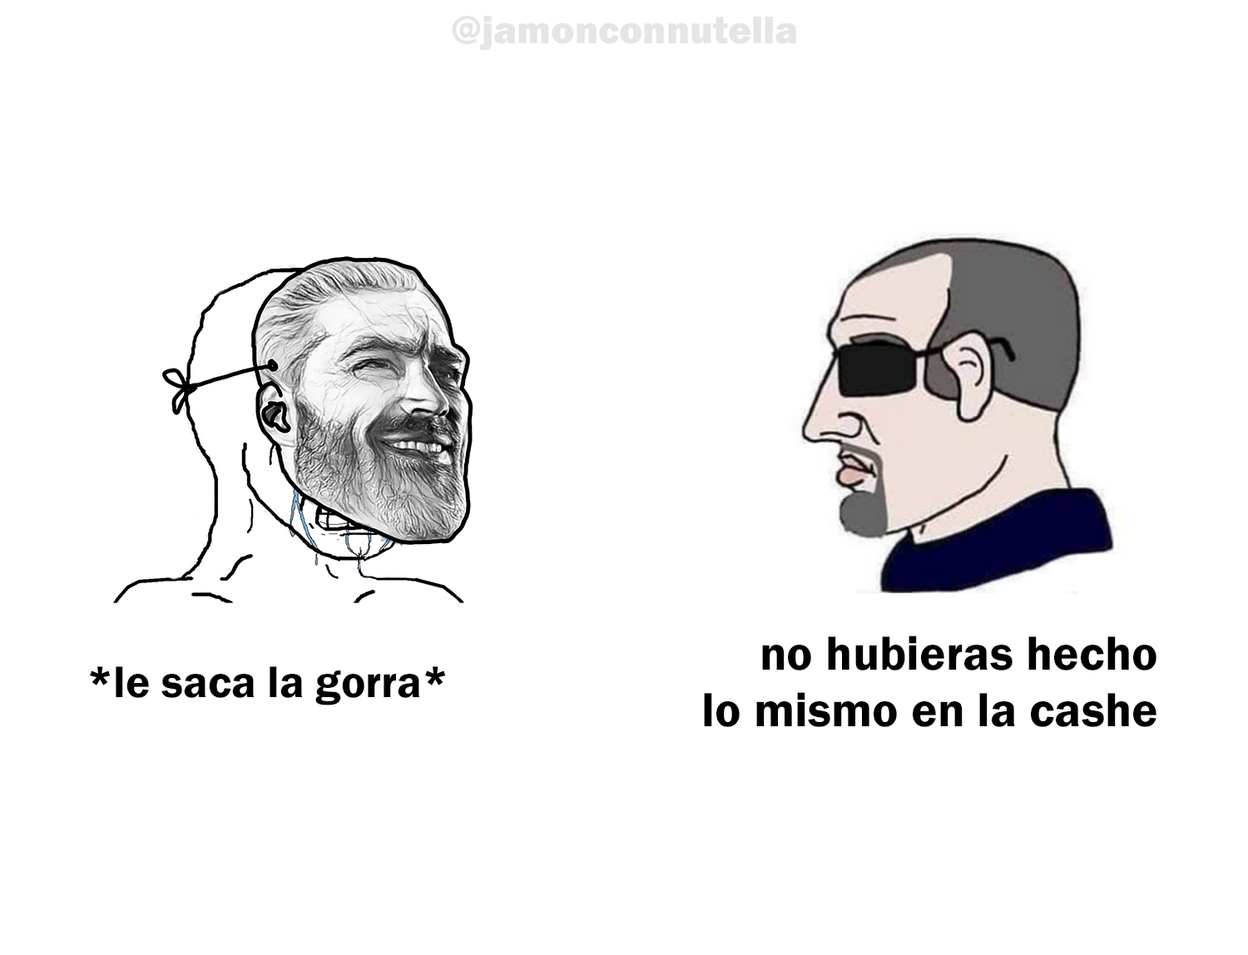
<style>
.page{position:relative;width:1248px;height:955px;background:#ffffff}
.page>*{position:absolute;margin:0}
.t1{font:39.9px "FranklinGothic-Heavy";color:#e5e5e5}
.t2{font:49.5px "FranklinGothic-Demi";color:#000000}
.t3{font:45.7px "FranklinGothic-Demi";color:#000000}
</style>
<div class="page">
<p class="t1" style="left:452px;top:16px;width:345px;height:35px">@jamonconnutella</p>
<p class="t2" style="left:704px;top:636px;width:453px;height:91px;text-align:right">no hubieras hecho<br>lo mismo en la cashe</p>
<p class="t3" style="left:90px;top:667px;width:356px;height:39px">*le saca la gorra*</p>
</div>
